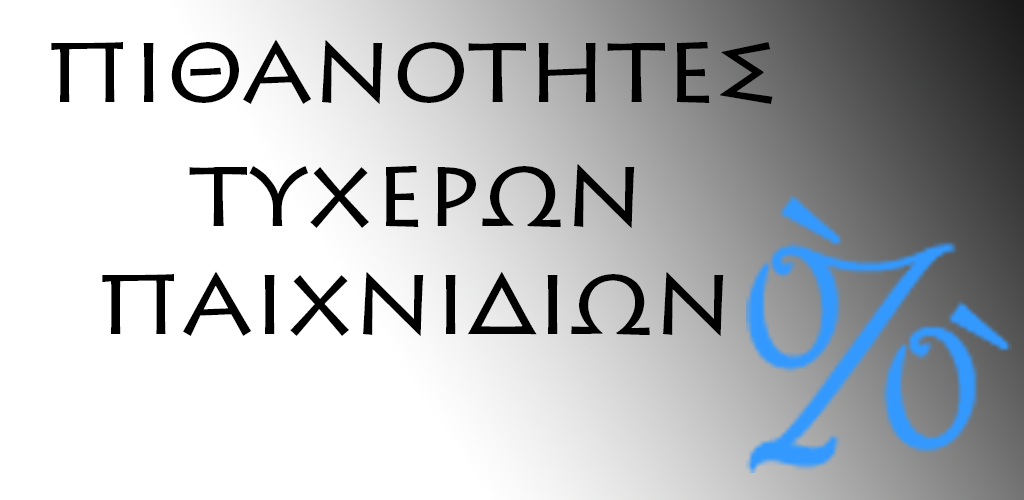
<style>
.page{position:relative;width:1024px;height:500px;background:#ffffff}
.page>*{position:absolute;margin:0}
.t1{font:100px "LithosPro-Regular";color:#000000}
</style>
<div class="page">
<p class="t1" style="left:51px;top:39px;width:722px;height:65px">πιθανοτητες</p>
<p class="t1" style="left:189px;top:164px;width:446px;height:64px">τυχeρων</p>
<p class="t1" style="left:102px;top:271px;width:622px;height:65px">παιχνιδιων</p>
</div>
